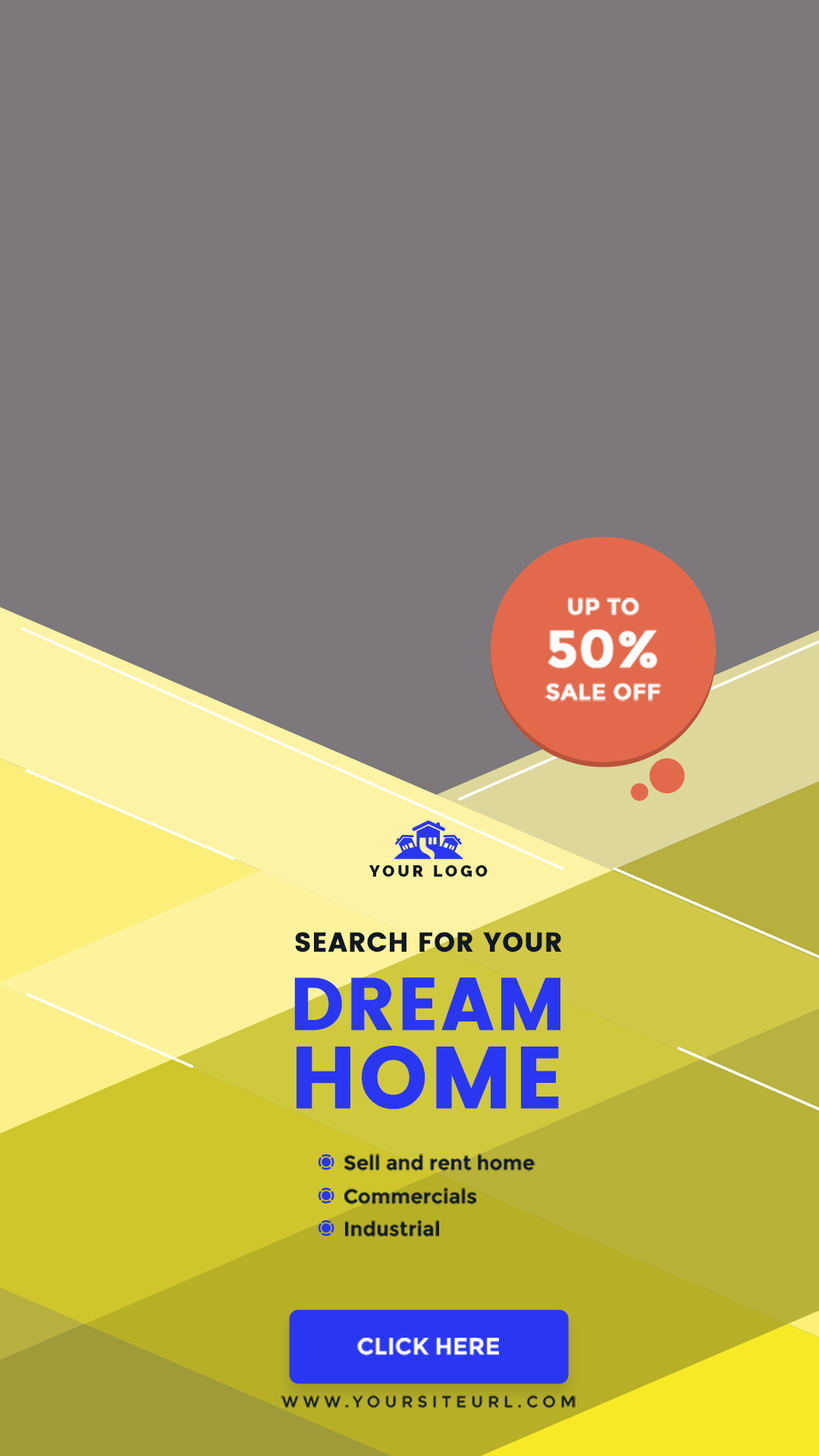
<style>
.page{position:relative;width:819px;height:1456px;background:#7c787b}
.page>*{position:absolute;margin:0}
.t1{font:22.5px/32.5px "Montserrat-Bold";color:#ffffff;text-transform:uppercase;font-weight:bold}
.t2{font:22.5px/52.5px "Montserrat-Bold";color:#ffffff;text-transform:uppercase;font-weight:bold}
.t3{font:52.5px/52.5px "Montserrat-Bold";color:#ffffff;text-transform:uppercase;font-weight:bold}
.t4{font:15.7px "Raleway-Black";letter-spacing:0.2em;color:#101823;text-transform:uppercase}
.t5{font:26.9px/78.4px "Poppins";color:#101823;text-transform:uppercase;font-weight:bold}
.t6{font:73.9px/78.4px "Poppins";color:#2937f2;text-transform:uppercase;font-weight:bold}
.t7{font:87.3px/78.4px "Poppins";color:#2937f2;text-transform:uppercase;font-weight:bold}
.t8{font:20.2px "Montserrat-Bold";color:#101823}
.t9{font:23.5px "Montserrat-Bold";color:#ffffff;text-transform:uppercase}
.t10{font:15.7px "Montserrat-Regular";letter-spacing:0.3em;color:#101823;text-transform:uppercase}
</style>
<div class="page">
<p class="t1" style="left:544px;top:598px;width:117px;height:103px;text-align:center"><span class="t2">up to<br></span><span class="t3">50%<br></span>sale off</p>
<p class="t4" style="left:369px;top:865px;width:119px;height:12px">your logo</p>
<p class="t5" style="left:294px;top:932px;width:267px;height:177px;text-align:center">search for your<br><span class="t6">dream<br></span><span class="t7">home</span></p>
<p class="t8" style="left:344px;top:1153px;width:191px;height:19px">Sell and rent home</p>
<p class="t8" style="left:344px;top:1188px;width:132px;height:17px">Commercials</p>
<p class="t8" style="left:345px;top:1220px;width:94px;height:17px">Industrial</p>
<p class="t9" style="left:357px;top:1338px;width:142px;height:18px">click here</p>
<p class="t10" style="left:281px;top:1395px;width:295px;height:13px">www.yoursiteurl.com</p>
</div>
